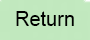
<style>
.page{position:relative;width:90px;height:40px;background:#c1e8be}
.page>*{position:absolute;margin:0}
.t1{font:20px "ArialMT";color:#000000}
</style>
<div class="page">
<p class="t1" style="left:16px;top:11px;width:58px;height:15px">Return</p>
</div>
